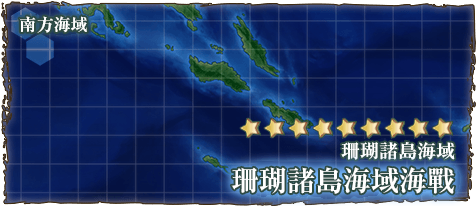
<style>
.page{position:relative;width:476px;height:206px}
.page>*{position:absolute;margin:0}
.t1{font:17px "RyuminPr6N-ExBold";color:#ffffff}
.t2{font:19px "RyuminPro-ExBold";color:#ffffff}
.t3{font:28px "RyuminPro-ExBold";color:#ffffff}
</style>
<div class="page">
<p class="t1" style="left:19px;top:16px;width:68px;height:17px">南方海域</p>
<p class="t2" style="left:341px;top:142px;width:114px;height:18px">珊瑚諸島海域</p>
<p class="t3" style="left:231px;top:167px;width:224px;height:27px">珊瑚諸島海域海戰</p>
</div>
